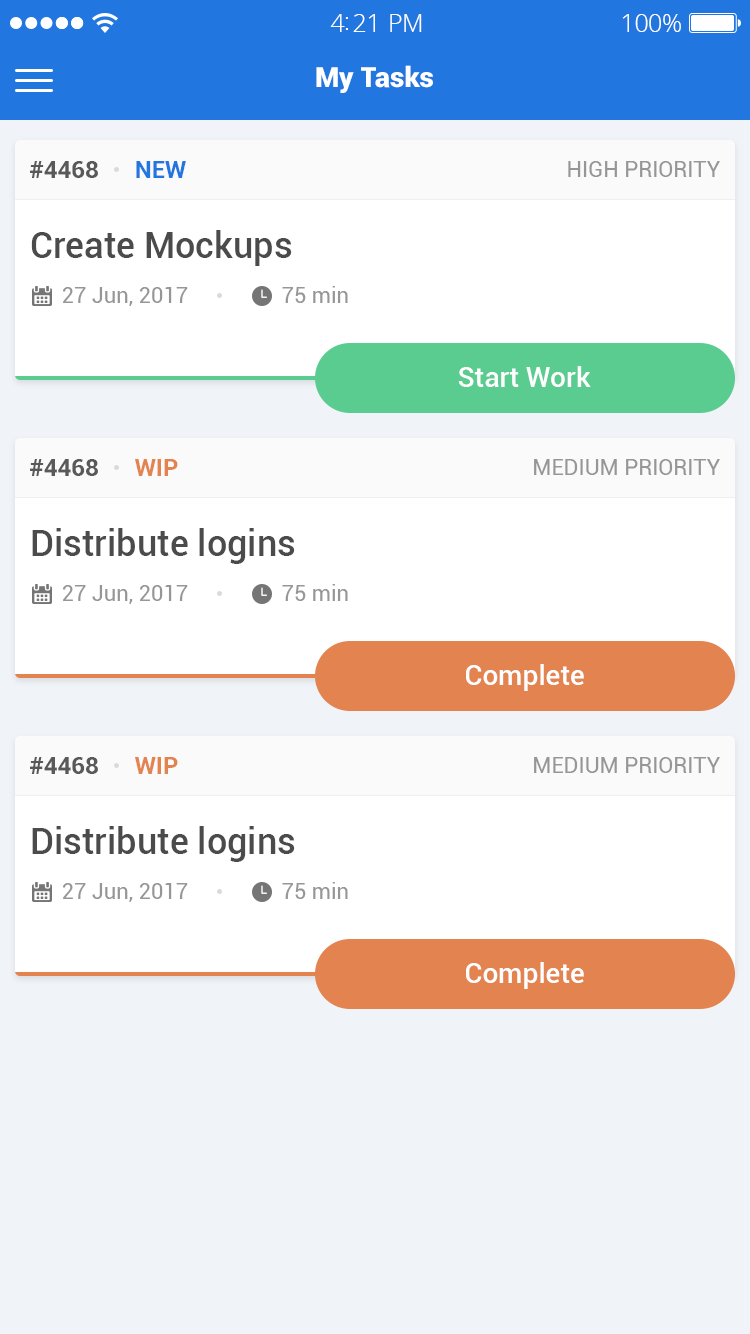
<style>
.page{position:relative;width:750px;height:1334px;background:#f0f4f8}
.page>*{position:absolute;margin:0}
.t1{font:25px "OpenSans-Light";letter-spacing:-0.02em;color:#ffffff}
.t2{font:28px "Roboto-Black";color:#ffffff}
.t3{font:24px "Roboto-Bold";color:#595959;text-transform:uppercase}
.t4{font:24px "Roboto-Bold";color:#2176df;text-transform:uppercase}
.t5{font:22px "Roboto-Regular";color:#969696;text-transform:uppercase}
.t6{font:36px "Roboto-Medium";color:#4b4b4b}
.t7{font:22px "Roboto-Regular";color:#969696}
.t8{font:28px "Roboto-Medium";color:#ffffff}
.t9{font:24px "Roboto-Bold";color:#e28350;text-transform:uppercase}
</style>
<div class="page">
<p class="t1" style="left:330px;top:14px;width:92px;height:18px">4:21 PM</p>
<p class="t1" style="left:622px;top:14px;width:59px;height:18px">100%</p>
<p class="t2" style="left:316px;top:65px;width:117px;height:28px">My Tasks</p>
<p class="t3" style="left:30px;top:161px;width:156px;height:17px">#4468      <span class="t4">NEW</span></p>
<p class="t5" style="left:568px;top:161px;width:152px;height:16px">high Priority</p>
<p class="t6" style="left:31px;top:230px;width:261px;height:36px">Create Mockups</p>
<p class="t7" style="left:63px;top:287px;width:125px;height:19px">27 Jun, 2017</p>
<p class="t7" style="left:282px;top:286px;width:66px;height:17px">75 min</p>
<p class="t8" style="left:458px;top:366px;width:133px;height:21px">Start Work</p>
<p class="t3" style="left:30px;top:459px;width:148px;height:17px">#4468      <span class="t9">WIP</span></p>
<p class="t5" style="left:534px;top:459px;width:186px;height:16px">medium Priority</p>
<p class="t6" style="left:32px;top:528px;width:263px;height:36px">Distribute logins</p>
<p class="t7" style="left:63px;top:585px;width:125px;height:19px">27 Jun, 2017</p>
<p class="t7" style="left:282px;top:584px;width:66px;height:17px">75 min</p>
<p class="t8" style="left:466px;top:664px;width:118px;height:27px">Complete</p>
<p class="t3" style="left:30px;top:757px;width:148px;height:17px">#4468      <span class="t9">WIP</span></p>
<p class="t5" style="left:534px;top:757px;width:186px;height:16px">medium Priority</p>
<p class="t6" style="left:32px;top:826px;width:263px;height:36px">Distribute logins</p>
<p class="t7" style="left:63px;top:883px;width:125px;height:19px">27 Jun, 2017</p>
<p class="t7" style="left:282px;top:882px;width:66px;height:17px">75 min</p>
<p class="t8" style="left:466px;top:962px;width:118px;height:27px">Complete</p>
</div>
